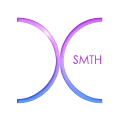
<style>
.page{position:relative;width:120px;height:120px;background:#ffffff}
.page>*{position:absolute;margin:0}
.t1{font:11.7px "STXihei";color:#ba4bdf}
</style>
<div class="page">
<p class="t1" style="left:73px;top:55px;width:29px;height:9px">SMTH</p>
</div>
